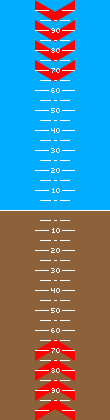
<style>
.page{position:relative;width:110px;height:420px;background:#8d613a}
.page>*{position:absolute;margin:0}
.t1{font:9px "SmallestPixel-7";color:#ffffff}
</style>
<div class="page">
<p class="t1" style="left:51px;top:28px;width:9px;height:5px">90</p>
<p class="t1" style="left:51px;top:48px;width:9px;height:5px">80</p>
<p class="t1" style="left:51px;top:68px;width:9px;height:5px">70</p>
<p class="t1" style="left:51px;top:88px;width:9px;height:5px">60</p>
<p class="t1" style="left:51px;top:108px;width:9px;height:5px">50</p>
<p class="t1" style="left:51px;top:128px;width:9px;height:5px">40</p>
<p class="t1" style="left:51px;top:148px;width:9px;height:5px">30</p>
<p class="t1" style="left:51px;top:168px;width:9px;height:5px">20</p>
<p class="t1" style="left:52px;top:188px;width:8px;height:5px">10</p>
<p class="t1" style="left:52px;top:228px;width:8px;height:5px">10</p>
<p class="t1" style="left:51px;top:248px;width:9px;height:5px">20</p>
<p class="t1" style="left:51px;top:268px;width:9px;height:5px">30</p>
<p class="t1" style="left:51px;top:288px;width:9px;height:5px">40</p>
<p class="t1" style="left:51px;top:308px;width:9px;height:5px">50</p>
<p class="t1" style="left:51px;top:328px;width:9px;height:5px">60</p>
<p class="t1" style="left:51px;top:348px;width:9px;height:5px">70</p>
<p class="t1" style="left:51px;top:368px;width:9px;height:5px">80</p>
<p class="t1" style="left:51px;top:388px;width:9px;height:5px">90</p>
</div>
